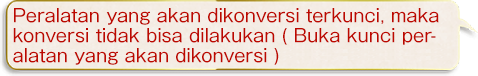
<style>
.page{position:relative;width:478px;height:76px}
.page>*{position:absolute;margin:0}
.t1{font:18px/20px "GothicMB101Pro-Regular";color:#bd0800}
</style>
<div class="page">
<p class="t1" style="left:13px;top:8px;width:426px;height:57px">Peralatan yang akan dikonversi terkunci, maka<br>konversi tidak bisa dilakukan ( Buka kunci per-<br>alatan yang akan dikonversi )</p>
</div>
